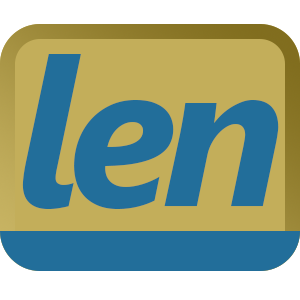
<style>
.page{position:relative;width:300px;height:300px;background:#c3ae5a}
.page>*{position:absolute;margin:0}
.t1{font:204.8px "SegoeUI-BoldItalic";letter-spacing:-0.058em;color:#226e9a}
</style>
<div class="page">
<p class="t1" style="left:22px;top:54px;width:257px;height:155px">len</p>
</div>
